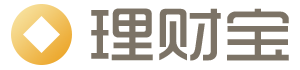
<style>
.page{position:relative;width:300px;height:70px;background:#ffffff}
.page>*{position:absolute;margin:0}
.t1{font:62.2px "TRENDS";color:#7c7366;scale:1.09 1}
</style>
<div class="page">
<p class="t1" style="left:91px;top:8px;width:198px;height:53px">理财宝</p>
</div>
